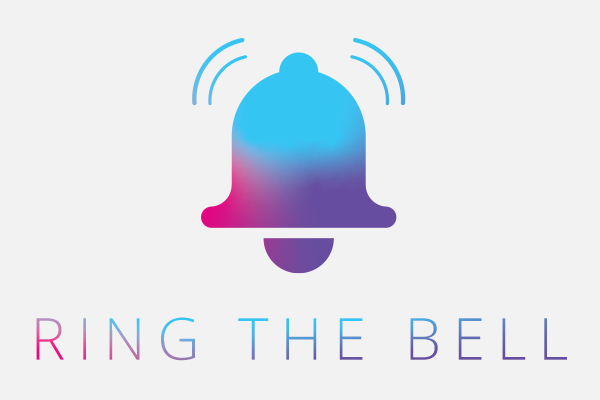
<style>
.page{position:relative;width:600px;height:400px;background:#f2f2f2}
.page>*{position:absolute;margin:0}
.t1{font:58.3px "OpenSans-Light";letter-spacing:0.2em}
</style>
<div class="page">
<p class="t1" style="left:36px;top:317px;width:531px;height:44px">RING THE BELL</p>
</div>
